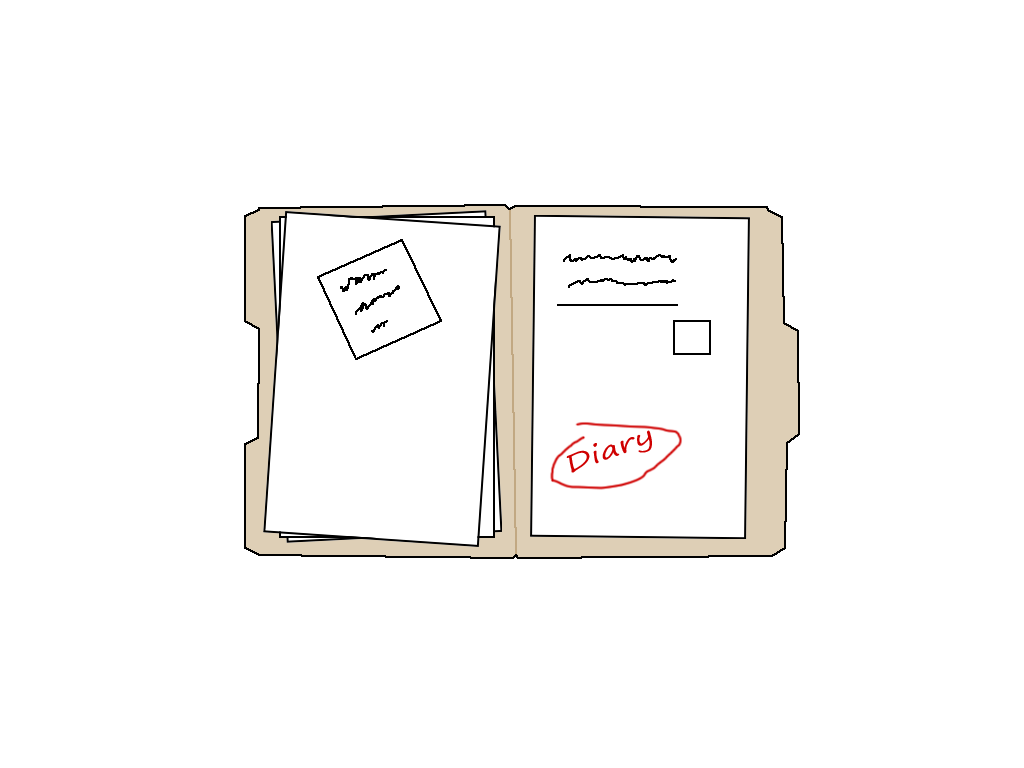
<style>
.page{position:relative;width:1024px;height:768px;background:#ffffff}
.page>*{position:absolute;margin:0}
.t1{font:23.6px "SegoePrint";color:#cf0000;scale:1.41 1}
</style>
<div class="page">
<p class="t1" style="left:566px;top:430px;width:86px;height:43px;rotate:-21deg">Diary</p>
</div>
